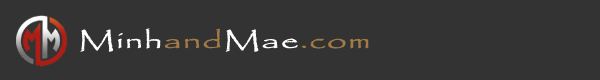
<style>
.page{position:relative;width:600px;height:80px;background:#333333}
.page>*{position:absolute;margin:0}
.t1{font:23.4px "Papyrus-Regular";color:#fefefd;font-weight:bold;scale:1.54 1}
.t2{font:23.4px "Papyrus-Regular";color:#a27b45;font-weight:bold;scale:1.54 1}
</style>
<div class="page">
<p class="t1" style="left:80px;top:28px;width:289px;height:24px">Minh<span class="t2">and</span>Mae<span class="t2">.com</span></p>
</div>
